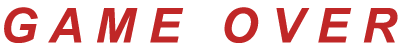
<style>
.page{position:relative;width:402px;height:50px;background:#ffffff}
.page>*{position:absolute;margin:0}
.t1{font:48px "Arial-BoldItalicMT";color:#c02727}
</style>
<div class="page">
<p class="t1" style="left:4px;top:7px;width:394px;height:36px">G A M E   O V E R</p>
</div>
